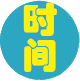
<style>
.page{position:relative;width:80px;height:81px;background:#2ca7c1}
.page>*{position:absolute;margin:0}
.t1{font:36px/36px "STHupo";color:#fff008}
</style>
<div class="page">
<p class="t1" style="left:23px;top:2px;width:34px;height:70px">时<br>间</p>
</div>
